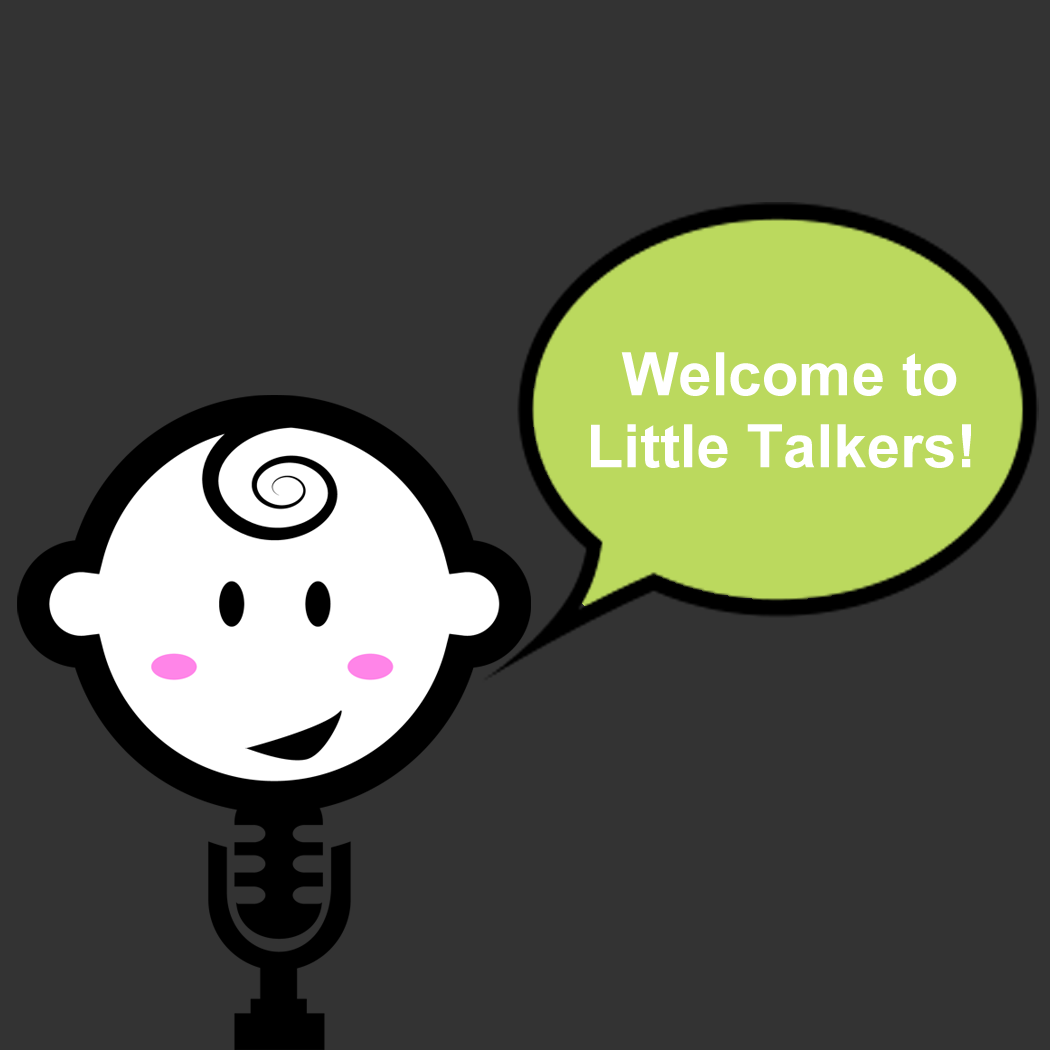
<style>
.page{position:relative;width:1050px;height:1050px;background:#333333}
.page>*{position:absolute;margin:0}
.t1{font:60px "Arial-BoldMT";color:#ffffff}
</style>
<div class="page">
<p class="t1" style="left:591px;top:352px;width:380px;height:116px;text-align:center">Welcome to<br>Little Talkers!</p>
</div>
